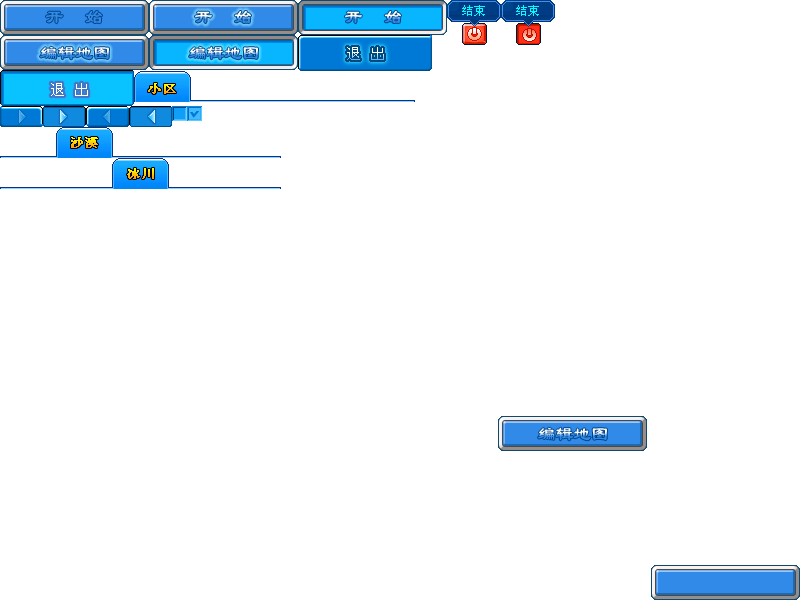
<style>
.page{position:relative;width:800px;height:600px;background:#ffffff}
.page>*{position:absolute;margin:0}
.t1{font:19.8px "LiSu";letter-spacing:0.005em;scale:0.91 1}
.t2{font:12px "STZhongsong";font-weight:bold;scale:1.15 1}
</style>
<div class="page">
<p class="t1" style="left:195px;top:11px;width:56px;height:13px">开   始</p>
<p class="t1" style="left:345px;top:11px;width:56px;height:13px">开   始</p>
<p class="t1" style="left:40px;top:46px;width:69px;height:14px">编辑地图</p>
<p class="t1" style="left:189px;top:46px;width:69px;height:14px">编辑地图</p>
<p class="t2" style="left:148px;top:83px;width:28px;height:11px">小区</p>
<p class="t2" style="left:71px;top:137px;width:27px;height:11px">沙漠</p>
<p class="t2" style="left:127px;top:168px;width:27px;height:11px">冰川</p>
<p class="t1" style="left:538px;top:427px;width:69px;height:14px">编辑地图</p>
</div>
